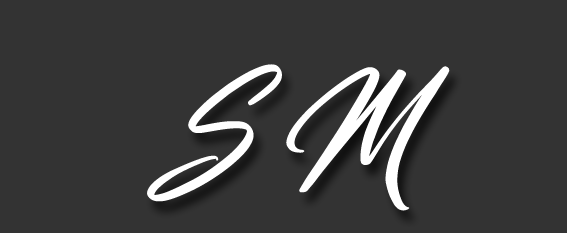
<style>
.page{position:relative;width:567px;height:233px;background:#333333}
.page>*{position:absolute;margin:0}
.t1{font:144px "WashingtonCalligraphy-Italic";color:#ffffff}
</style>
<div class="page">
<p class="t1" style="left:147px;top:64px;width:303px;height:147px">S M</p>
</div>
